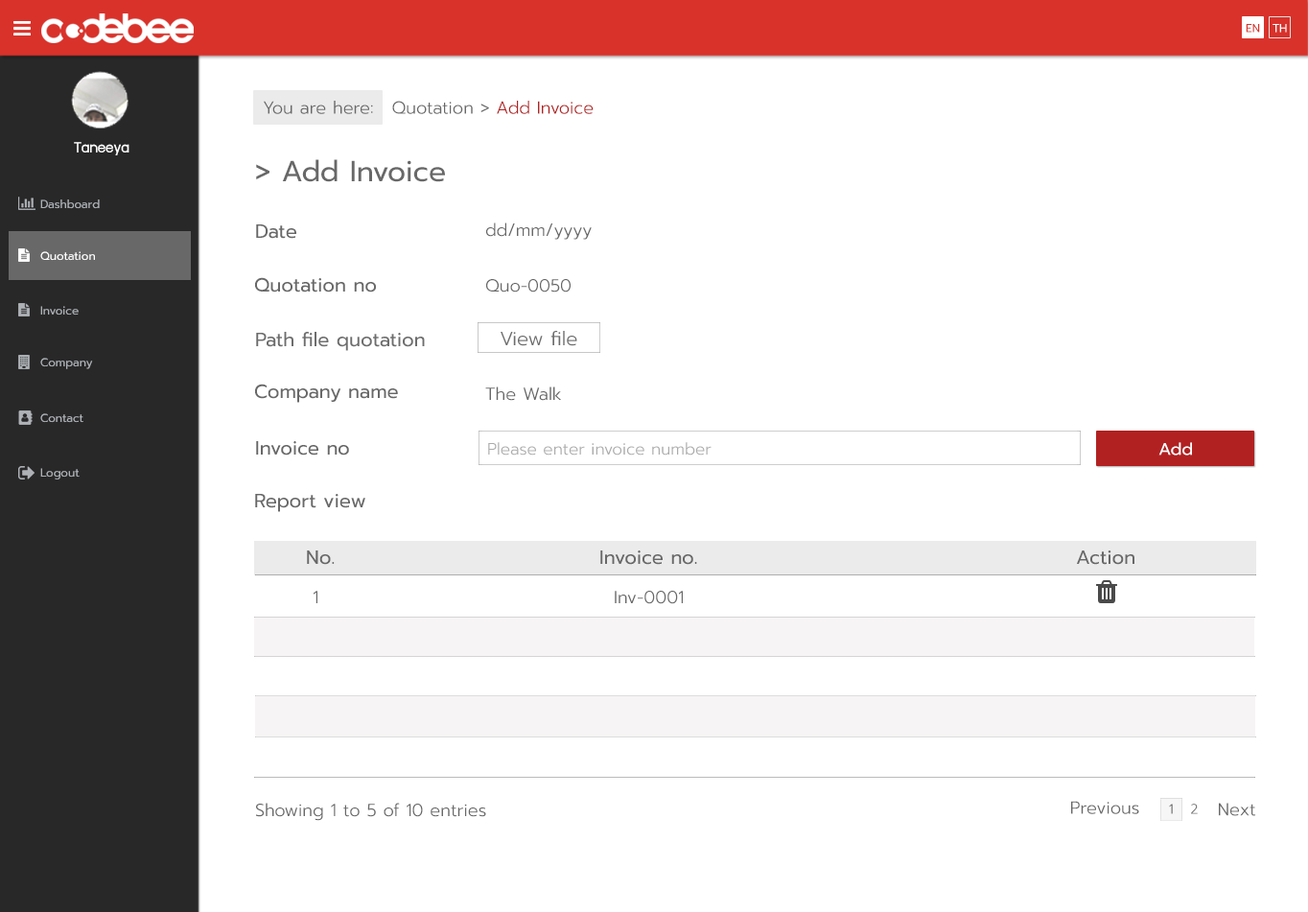
<style>
.page{position:relative;width:1308px;height:912px;background:#ffffff}
.page>*{position:absolute;margin:0}
.t1{font:11.5px "Prompt-Regular";color:#d8322b}
.t2{font:11.5px "Prompt-Regular";color:#ffffff}
.t3{font:17.3px "Prompt-Light";color:#686868}
.t4{font:17.3px "Prompt-Light";color:#b22121}
.t5{font:17.3px "supermarket";color:#ffffff}
.t6{font:28.8px "Prompt-Regular";color:#686868}
.t7{font:11.5px "Prompt-Regular";color:#aeb2b7}
.t8{font:19.2px "Prompt-Regular";color:#686868}
.t9{font:19.2px "Prompt-Light";color:#686868}
.t10{font:16.3px "Prompt-Light";color:#acacac}
.t11{font:16.8px "Prompt-Regular";color:#ffffff}
.t12{font:13.4px "Prompt-Light";color:#686868}
</style>
<div class="page">
<p class="t1" style="left:1245px;top:24px;width:15px;height:9px">EN</p>
<p class="t2" style="left:1272px;top:24px;width:15px;height:9px">TH</p>
<p class="t3" style="left:264px;top:101px;width:109px;height:13px">You are here:</p>
<p class="t3" style="left:392px;top:101px;width:201px;height:13px">Quotation &gt; <span class="t4">Add Invoice</span></p>
<p class="t5" style="left:74px;top:142px;width:55px;height:13px">Taneeya</p>
<p class="t6" style="left:256px;top:159px;width:189px;height:23px">&gt; Add Invoice</p>
<p class="t7" style="left:40px;top:199px;width:60px;height:10px">Dashboard</p>
<p class="t8" style="left:256px;top:224px;width:40px;height:15px">Date</p>
<p class="t3" style="left:486px;top:222px;width:106px;height:18px">dd/mm/yyyy</p>
<p class="t2" style="left:40px;top:251px;width:55px;height:10px">Quotation</p>
<p class="t8" style="left:255px;top:277px;width:121px;height:15px">Quotation no</p>
<p class="t3" style="left:486px;top:279px;width:84px;height:13px">Quo-0050</p>
<p class="t7" style="left:40px;top:306px;width:39px;height:9px">Invoice</p>
<p class="t8" style="left:256px;top:332px;width:169px;height:19px">Path file quotation</p>
<p class="t9" style="left:500px;top:331px;width:77px;height:15px">View file</p>
<p class="t7" style="left:40px;top:358px;width:53px;height:11px">Company</p>
<p class="t8" style="left:255px;top:384px;width:143px;height:19px">Company name</p>
<p class="t3" style="left:485px;top:386px;width:76px;height:15px">The Walk</p>
<p class="t7" style="left:40px;top:413px;width:43px;height:10px">Contact</p>
<p class="t8" style="left:256px;top:441px;width:93px;height:14px">Invoice no</p>
<p class="t10" style="left:488px;top:442px;width:223px;height:13px">Please enter invoice number</p>
<p class="t11" style="left:1158px;top:442px;width:34px;height:13px">Add</p>
<p class="t7" style="left:40px;top:468px;width:40px;height:11px">Logout</p>
<p class="t8" style="left:255px;top:494px;width:110px;height:18px">Report view</p>
<p class="t8" style="left:307px;top:550px;width:28px;height:15px">No.</p>
<p class="t8" style="left:600px;top:550px;width:97px;height:15px">Invoice no.</p>
<p class="t8" style="left:1077px;top:550px;width:57px;height:15px">Action</p>
<p class="t3" style="left:314px;top:591px;width:3px;height:12px">1</p>
<p class="t3" style="left:615px;top:591px;width:68px;height:13px">Inv-0001</p>
<p class="t3" style="left:256px;top:802px;width:230px;height:19px">Showing 1 to 5 of 10 entries</p>
<p class="t3" style="left:1071px;top:801px;width:68px;height:13px">Previous</p>
<p class="t12" style="left:1169px;top:803px;width:4px;height:11px">1</p>
<p class="t12" style="left:1191px;top:803px;width:7px;height:11px">2</p>
<p class="t3" style="left:1219px;top:802px;width:36px;height:14px">Next</p>
</div>
